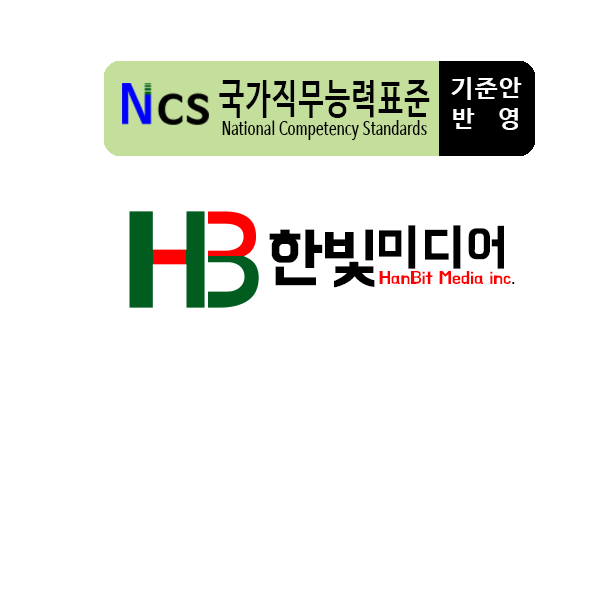
<style>
.page{position:relative;width:600px;height:600px;background:#ffffff}
.page>*{position:absolute;margin:0}
.t1{font:25.4px "NanumBarunGothicBold";letter-spacing:0.05em;color:#ffffff}
.t2{font:25.4px "NanumBarunGothicBold";letter-spacing:0.35em;color:#ffffff}
.t3{font:19.2px "NanumBarunGothicBold";letter-spacing:0.05em;color:#010101;scale:0.67 1}
.t4{font:42.3px "NanumBarunGothicBold";letter-spacing:0.05em;color:#010101;scale:0.67 1}
.t5{font:51.7px "BMHANNAPro";letter-spacing:0.05em;color:#000000}
.t6{font:67.6px "BMHANNAPro";letter-spacing:-0.025em;color:#000000}
.t7{font:17.7px "BMHANNAPro";letter-spacing:-0.01em;color:#ff0000}
.t8{font:17.7px "BMHANNAPro";letter-spacing:-0.01em;color:#000000}
</style>
<div class="page">
<p class="t1" style="left:451px;top:77px;width:71px;height:53px;text-align:center">기준안<br><span class="t2">반 영</span></p>
<p class="t3" style="left:219px;top:80px;width:211px;height:60px;text-align:center"><span class="t4">국가직무능력표준<br></span>National Competency Standards</p>
<p class="t5" style="left:269px;top:225px;width:235px;height:63px"><span class="t6">한빛</span>미디어</p>
<p class="t7" style="left:379px;top:271px;width:136px;height:13px">HanBit Media inc<span class="t8">.</span></p>
</div>
